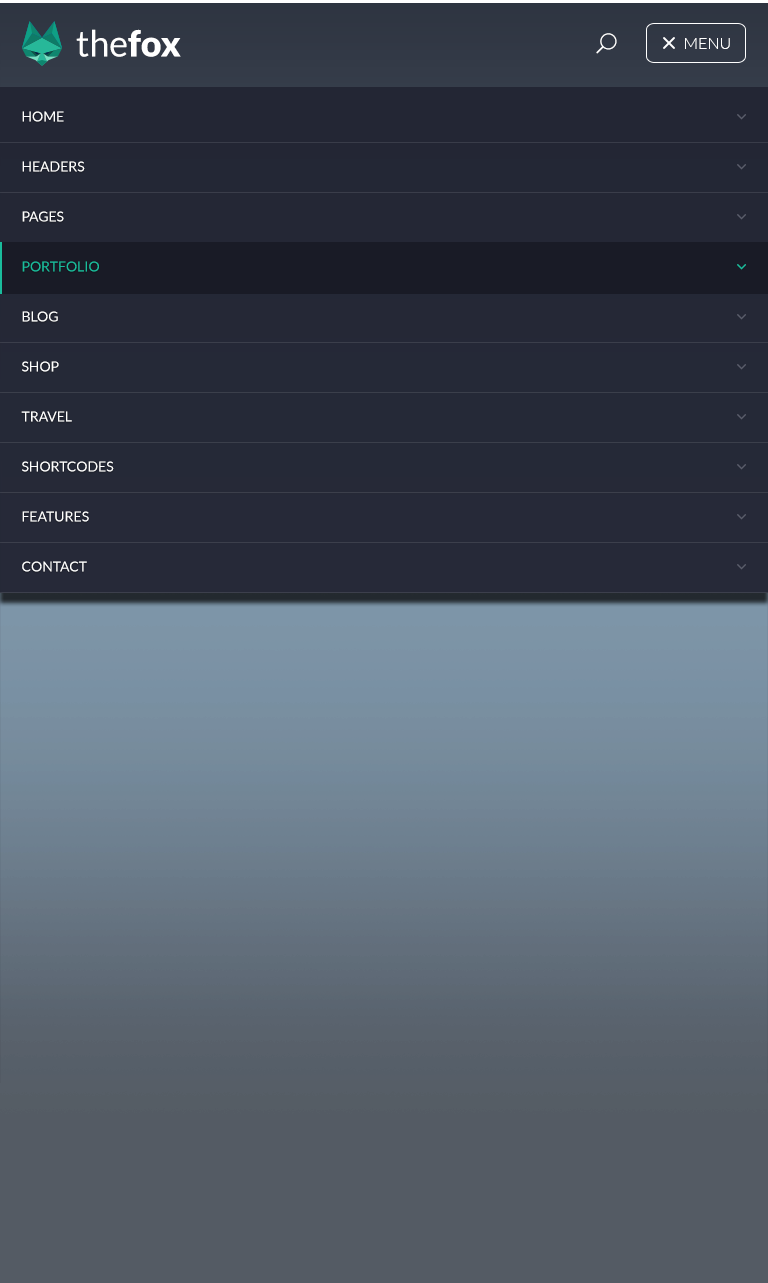
<style>
.page{position:relative;width:768px;height:1283px}
.page>*{position:absolute;margin:0}
.t1{font:36px "Lato-Regular";color:#ffffff}
.t2{font:36px "Lato-Black";color:#ffffff}
.t3{font:16px "Lato-Light";color:#ffffff;text-transform:uppercase}
.t4{font:14px/50px "Lato-Regular";color:#ffffff;text-transform:uppercase}
.t5{font:14px/50px "Lato-Regular";color:#1abc9c;text-transform:uppercase}
</style>
<div class="page">
<p class="t1" style="left:76px;top:29px;width:105px;height:28px">the<span class="t2">fox</span></p>
<p class="t3" style="left:685px;top:38px;width:45px;height:11px">MENU</p>
<p class="t4" style="left:21px;top:111px;width:93px;height:461px">Home<br>HEADERS<br>Pages<br><span class="t5">Portfolio<br></span>Blog<br>shop<br>travel<br>shortcodes<br>features<br>contact</p>
</div>
